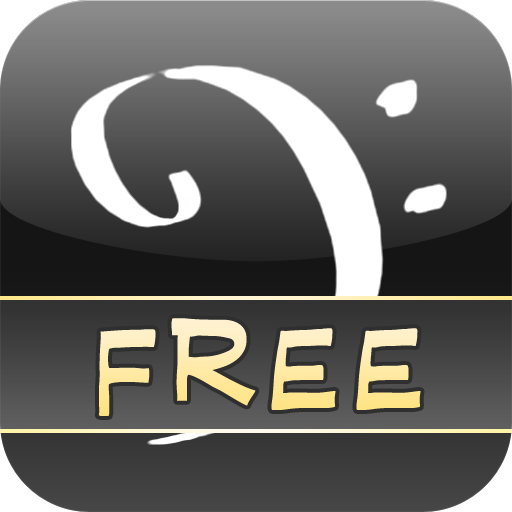
<style>
.page{position:relative;width:512px;height:512px}
.page>*{position:absolute;margin:0}
.t1{font:160px "RedStateBlueStateBB";letter-spacing:0.075em}
</style>
<div class="page">
<p class="t1" style="left:98px;top:318px;width:323px;height:98px">FREE</p>
</div>
